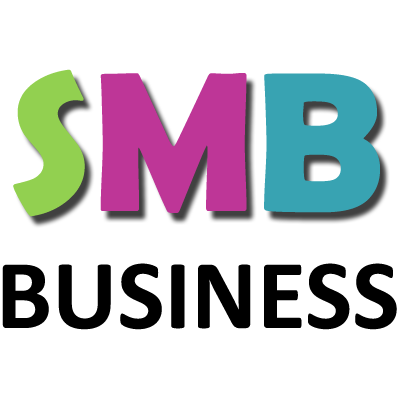
<style>
.page{position:relative;width:400px;height:400px;background:#ffffff}
.page>*{position:absolute;margin:0}
.t1{font:200px "BerlinSansFBDemi-Bold";color:#92d050}
.t2{font:200px "BerlinSansFBDemi-Bold";color:#be3697}
.t3{font:200px "BerlinSansFBDemi-Bold";color:#38a3b2}
.t4{font:100px "Calibri-Bold";color:#000000}
</style>
<div class="page">
<p class="t1" style="left:13px;top:69px;width:367px;height:148px">S<span class="t2">M</span><span class="t3">B</span></p>
<p class="t4" style="left:2px;top:263px;width:395px;height:67px">BUSINESS</p>
</div>
